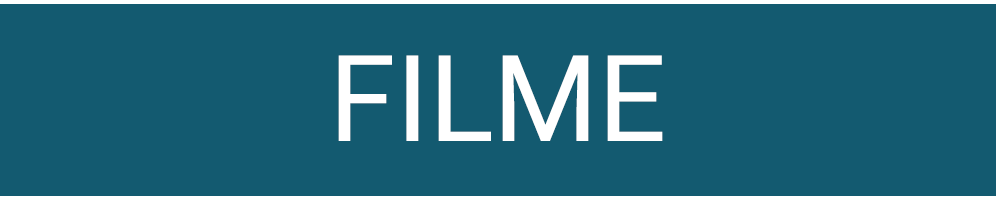
<style>
.page{position:relative;width:1000px;height:200px;background:#135a70}
.page>*{position:absolute;margin:0}
.t1{font:120.3px "Roboto-Regular";color:#ffffff}
</style>
<div class="page">
<p class="t1" style="left:338px;top:55px;width:325px;height:86px">FILME</p>
</div>
